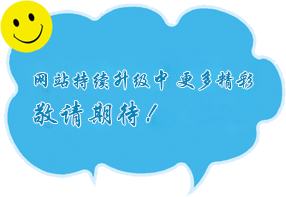
<style>
.page{position:relative;width:286px;height:197px;background:#ffffff}
.page>*{position:absolute;margin:0}
.t1{font:20px/30px "STXingkai";color:#0585bb;font-variant:small-caps}
.t2{font:28px/30px "STXingkai";color:#0585bb;font-variant:small-caps}
</style>
<div class="page">
<p class="t1" style="left:33px;top:70px;width:220px;height:58px">网站持续升级中 更多精彩 <br><span class="t2">敬请期待！</span></p>
</div>
